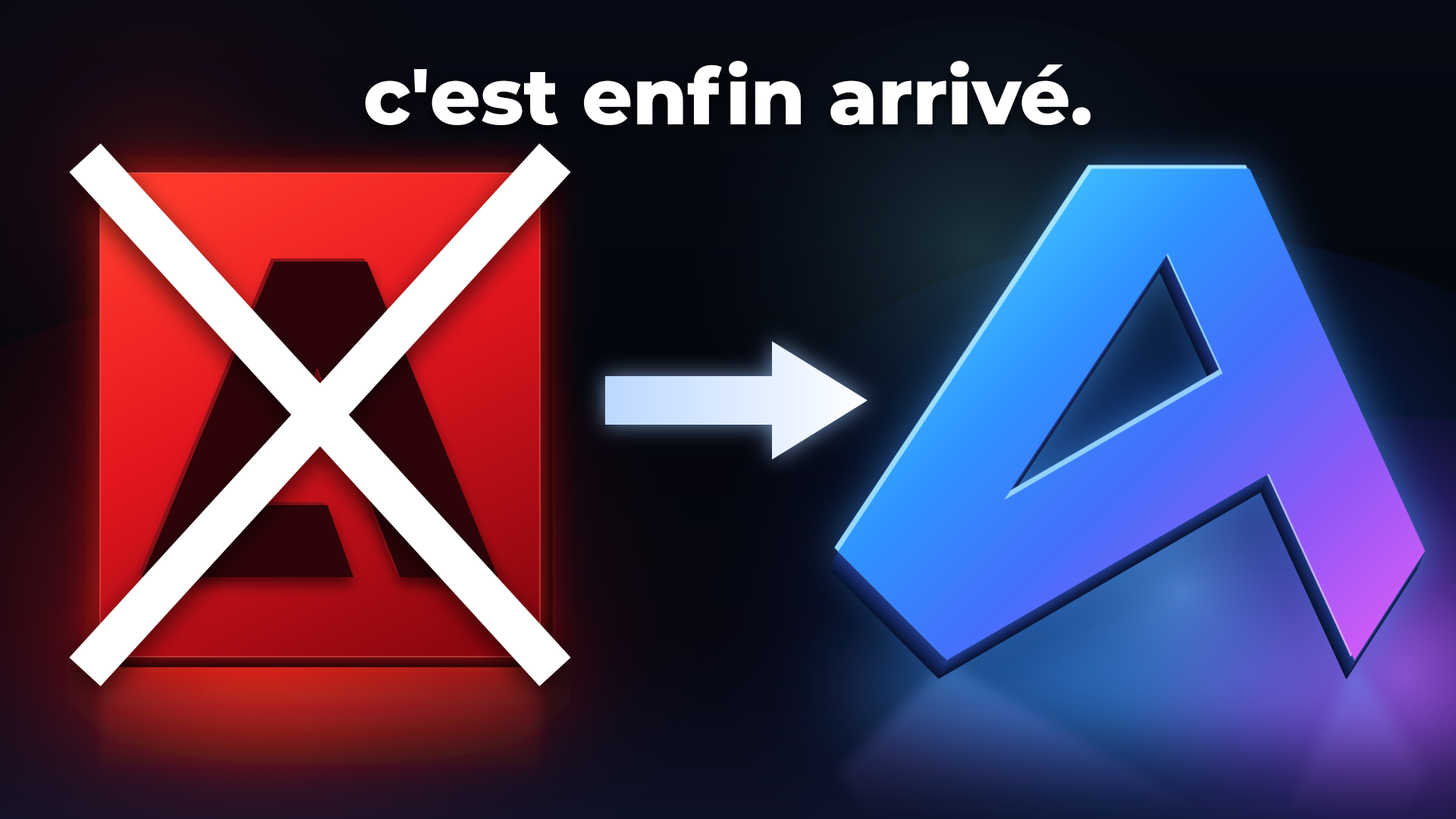
<style>
.page{position:relative;width:1456px;height:819px}
.page>*{position:absolute;margin:0}
.t1{font:78.9px "Montserrat-ExtraBold";color:#ffffff}
</style>
<div class="page">
<p class="t1" style="left:364px;top:61px;width:728px;height:65px">c'est enfin arrivé.</p>
</div>
